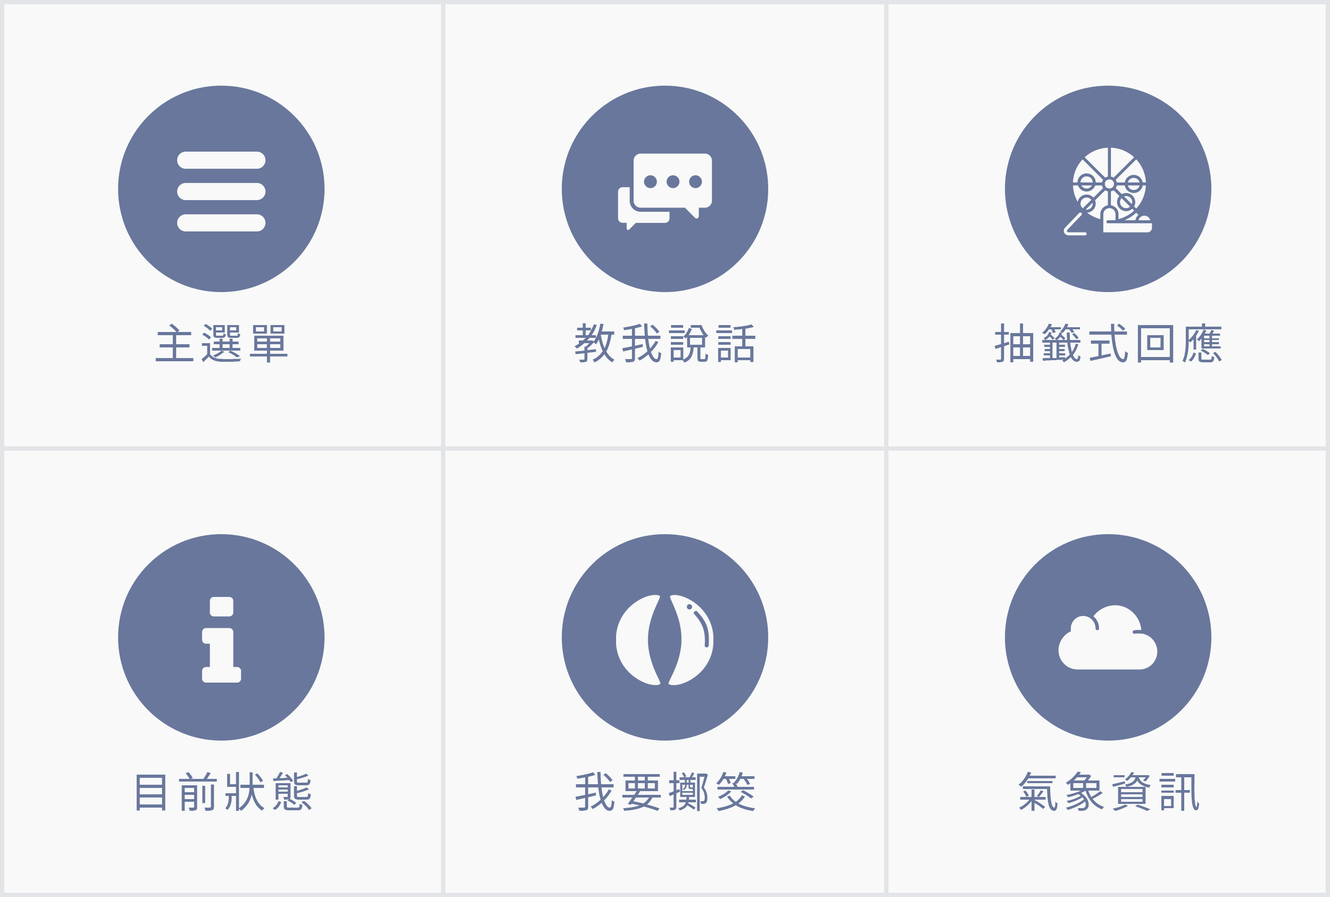
<style>
.page{position:relative;width:1330px;height:897px;background:#f8f9f8}
.page>*{position:absolute;margin:0}
.t1{font:42.6px "TaipeiSansTCBeta-Regular";letter-spacing:0.1em;color:#69779c}
</style>
<div class="page">
<p class="t1" style="left:155px;top:323px;width:133px;height:40px">主選單</p>
<p class="t1" style="left:574px;top:323px;width:181px;height:40px">教我說話</p>
<p class="t1" style="left:994px;top:323px;width:228px;height:40px">抽籤式回應</p>
<p class="t1" style="left:136px;top:772px;width:176px;height:39px">目前狀態</p>
<p class="t1" style="left:575px;top:771px;width:180px;height:40px">我要擲筊</p>
<p class="t1" style="left:1018px;top:771px;width:181px;height:40px">氣象資訊</p>
</div>
